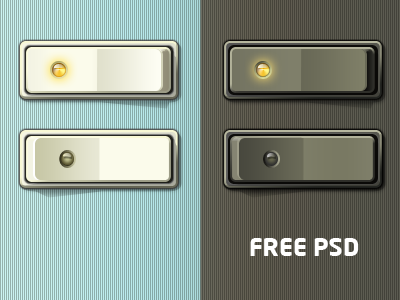
<style>
.page{position:relative;width:400px;height:300px}
.page>*{position:absolute;margin:0}
.t1{font:24px "NeoSansPro-Bold";color:#ffffff}
</style>
<div class="page">
<p class="t1" style="left:250px;top:238px;width:109px;height:18px">FREE PSD</p>
</div>
